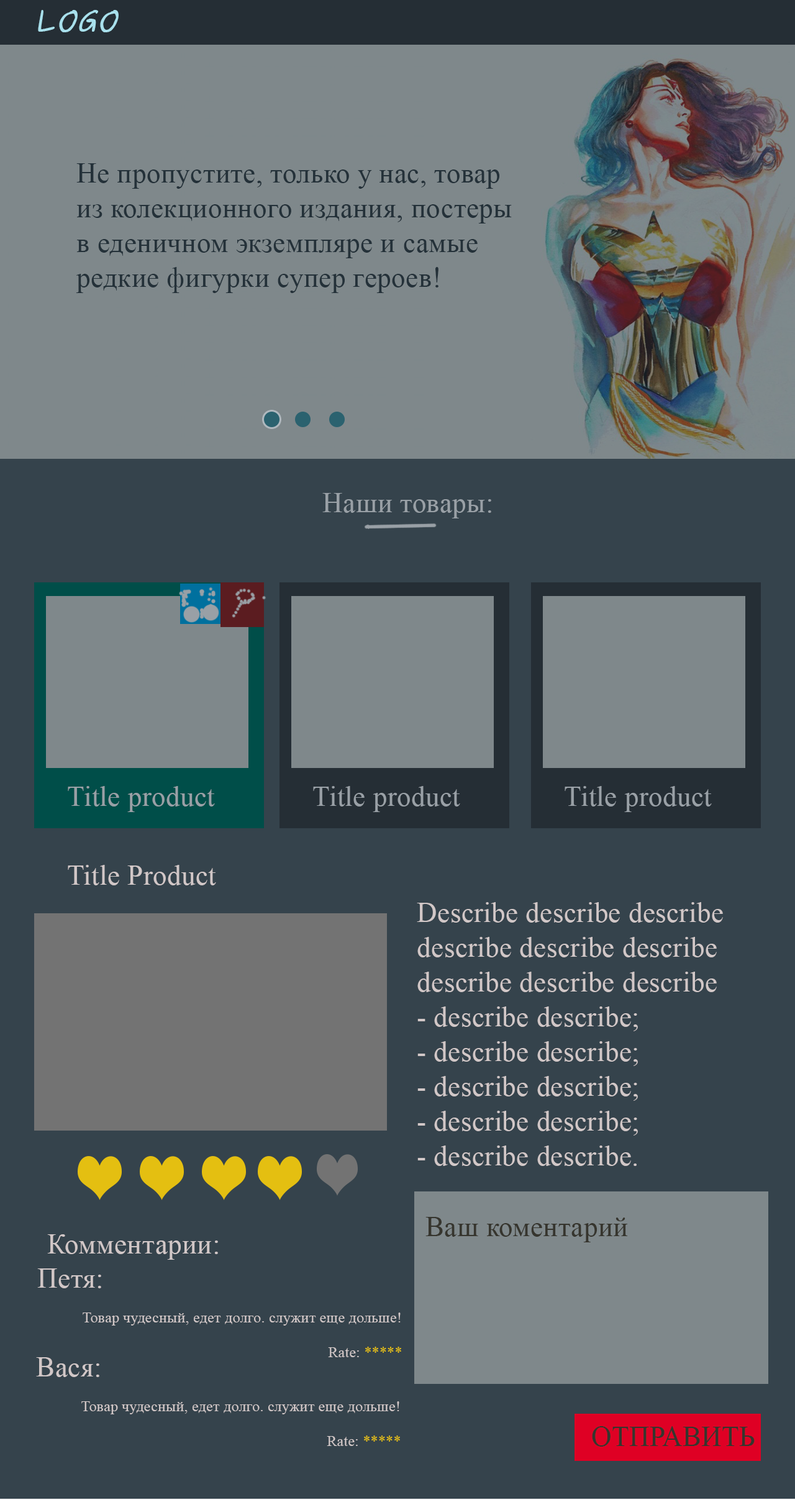
<style>
.page{position:relative;width:795px;height:1500px;background:#35434c}
.page>*{position:absolute;margin:0}
.t1{font:27.9px "Purisa-BoldOblique";letter-spacing:0.01em;color:#a8e0ec}
.t2{font:27.9px/34.8px "TimesNewRomanPSMT";letter-spacing:0.01em;color:#243139}
.t3{font:27.9px "TimesNewRomanPSMT";letter-spacing:0.01em;color:#99a0a6}
.t4{font:27.9px "TimesNewRomanPSMT";letter-spacing:0.01em;color:#d1c7c7}
.t5{font:27.9px/34.8px "TimesNewRomanPSMT";letter-spacing:0.01em;color:#d1c7c7}
.t6{font:27.9px "TimesNewRomanPSMT";letter-spacing:0.01em;color:#36352e}
.t7{font:14.9px/34.8px "TimesNewRomanPSMT";letter-spacing:0.01em;color:#d1c7c7}
.t8{font:14.9px/34.8px "TimesNewRomanPSMT";letter-spacing:0.01em;color:#e4bf11}
</style>
<div class="page">
<p class="t1" style="left:38px;top:10px;width:81px;height:22px">LOGO</p>
<p class="t2" style="left:76px;top:163px;width:436px;height:130px">Не пропустите, только у нас, товар<br>из колекционного издания, постеры<br>в еденичном экземпляре и самые <br>редкие фигурки супер героев!</p>
<p class="t3" style="left:322px;top:493px;width:169px;height:26px">Наши товары:</p>
<p class="t3" style="left:68px;top:786px;width:147px;height:26px">Title product</p>
<p class="t3" style="left:313px;top:786px;width:147px;height:26px">Title product</p>
<p class="t3" style="left:564px;top:786px;width:148px;height:26px">Title product</p>
<p class="t4" style="left:68px;top:865px;width:148px;height:20px">Title Product</p>
<p class="t5" style="left:417px;top:902px;width:306px;height:264px">Describe describe describe<br>describe describe describe<br>describe describe describe<br>- describe describe;<br>- describe describe;<br>- describe describe;<br>- describe describe;<br>- describe describe.</p>
<p class="t6" style="left:425px;top:1217px;width:203px;height:26px">Ваш коментарий</p>
<p class="t4" style="left:47px;top:1234px;width:171px;height:26px">Комментарии:</p>
<p class="t7" style="left:37px;top:1269px;width:364px;height:88px"><span class="t5">Петя: <br></span>  Товар чудесный, едет долго. служит еще дольше!<br>             Rate: <span class="t8">*****</span></p>
<p class="t7" style="left:36px;top:1357px;width:364px;height:89px"><span class="t5">Вася: <br></span>  Товар чудесный, едет долго. служит еще дольше!<br>             Rate: <span class="t8">*****</span></p>
<p class="t6" style="left:592px;top:1426px;width:162px;height:21px">ОТПРАВИТЬ</p>
</div>
